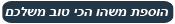
<style>
.page{position:relative;width:175px;height:24px;background:#233645}
.page>*{position:absolute;margin:0}
.t1{font:12px "Arial-BoldItalicMT";color:#fefefe;scale:1.14 1}
</style>
<div class="page">
<p class="t1" style="left:5px;top:7px;width:164px;height:9px">םכלשמ בוט יכה והשמ תפסוה</p>
</div>
